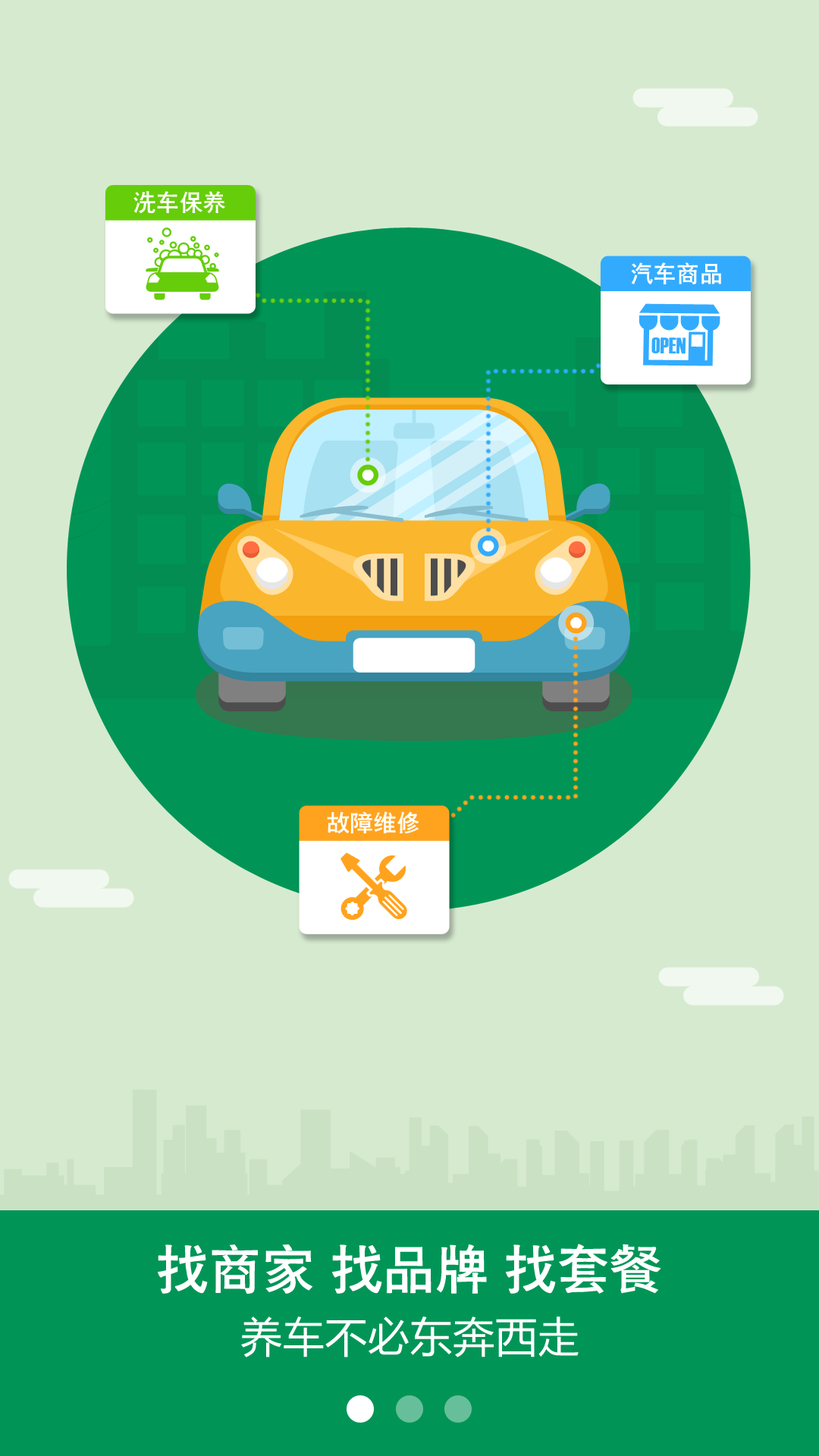
<style>
.page{position:relative;width:819px;height:1456px;background:#d6ead0}
.page>*{position:absolute;margin:0}
.t1{font:22.7px "CTCuHeiSJ";letter-spacing:0.02em;color:#ffffff}
.t2{font:51.8px "CTCuHeiSJ";letter-spacing:0.02em;color:#ffffff}
.t3{font:41.7px "MicrosoftYaHei";letter-spacing:0.02em;color:#ffffff}
</style>
<div class="page">
<p class="t1" style="left:133px;top:191px;width:92px;height:22px">洗车保养</p>
<p class="t1" style="left:631px;top:262px;width:90px;height:22px">汽车商品</p>
<p class="t1" style="left:327px;top:811px;width:92px;height:22px">故障维修</p>
<p class="t2" style="left:158px;top:1244px;width:503px;height:50px">找商家 找品牌 找套餐</p>
<p class="t3" style="left:241px;top:1316px;width:338px;height:41px">养车不必东奔西走</p>
</div>
